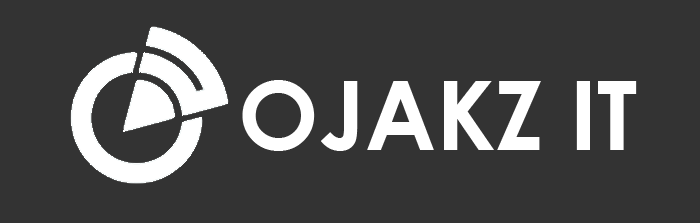
<style>
.page{position:relative;width:700px;height:223px;background:#333333}
.page>*{position:absolute;margin:0}
.t1{font:96px "CenturyGothic-Bold";color:#ffffff}
</style>
<div class="page">
<p class="t1" style="left:242px;top:80px;width:395px;height:71px">OJAKZ IT</p>
</div>
